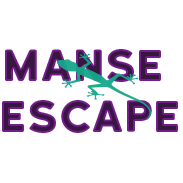
<style>
.page{position:relative;width:183px;height:183px;background:#ffffff}
.page>*{position:absolute;margin:0}
.t1{font:42.4px "KatahdinRound-Regular"}
</style>
<div class="page">
<p class="t1" style="left:2px;top:49px;width:176px;height:84px;text-align:center">Manse <br>Escape</p>
</div>
